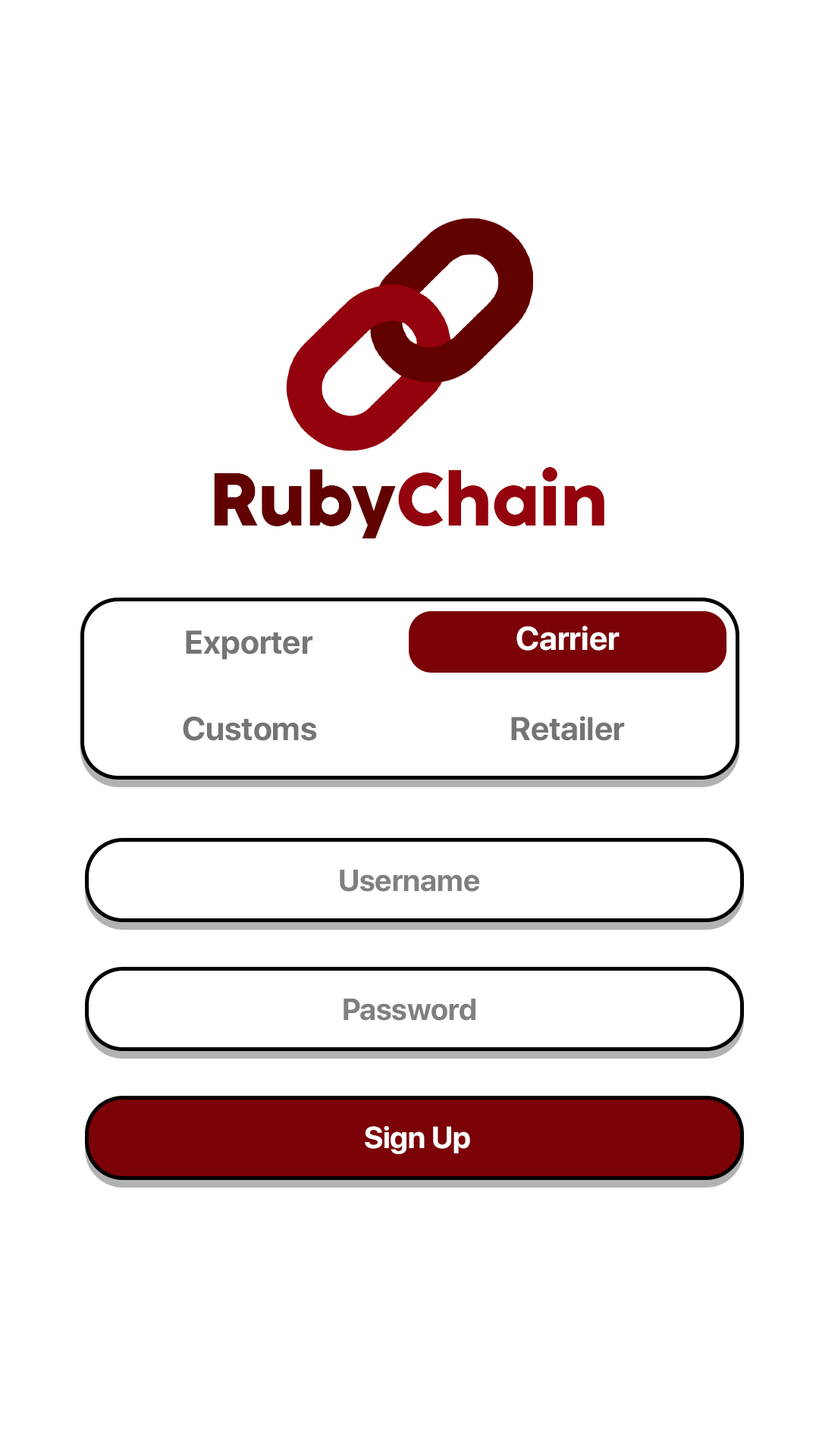
<style>
.page{position:relative;width:819px;height:1456px;background:#ffffff}
.page>*{position:absolute;margin:0}
.t1{font:73.9px "CocoSharpTrial-Extrabold";color:#94020d}
.t2{font:73.9px "CocoSharpTrial-Extrabold";color:#610200}
.t3{font:32.9px "SFProDisplay-Bold";color:#ffffff}
.t4{font:32.9px "SFProDisplay-Bold";color:#757575}
.t5{font:30.3px "SFProDisplay-Bold";color:#808080}
.t6{font:30.3px "SFProDisplay-Bold";color:#ffffff}
</style>
<div class="page">
<p class="t1" style="left:214px;top:466px;width:390px;height:71px"><span class="t2">Ruby</span>Chain</p>
<p class="t1" style="left:214px;top:467px;width:390px;height:71px"><span class="t2">Ruby</span>Chain</p>
<p class="t3" style="left:516px;top:626px;width:104px;height:25px">Carrier</p>
<p class="t4" style="left:186px;top:630px;width:127px;height:30px">Exporter</p>
<p class="t4" style="left:183px;top:716px;width:134px;height:25px">Customs</p>
<p class="t4" style="left:511px;top:716px;width:114px;height:25px">Retailer</p>
<p class="t5" style="left:340px;top:869px;width:140px;height:23px">Username</p>
<p class="t5" style="left:340px;top:869px;width:140px;height:23px">Username</p>
<p class="t5" style="left:344px;top:998px;width:131px;height:23px">Password</p>
<p class="t5" style="left:344px;top:998px;width:131px;height:23px">Password</p>
<p class="t6" style="left:365px;top:1125px;width:105px;height:29px">Sign Up</p>
</div>
